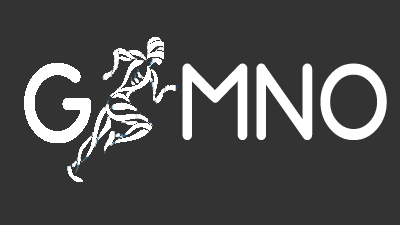
<style>
.page{position:relative;width:400px;height:225px;background:#333333}
.page>*{position:absolute;margin:0}
.t1{font:109px "Neon80s";color:#ffffff;scale:0.87 1}
</style>
<div class="page">
<p class="t1" style="left:182px;top:63px;width:205px;height:77px">MNO</p>
</div>
